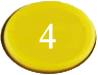
<style>
.page{position:relative;width:98px;height:75px;background:#ffffff}
.page>*{position:absolute;margin:0}
.t1{font:36px "TimesNewRomanPSMT";letter-spacing:-0.025em;color:#ffffff;font-weight:bold}
</style>
<div class="page">
<p class="t1" style="left:39px;top:23px;width:17px;height:26px">4</p>
</div>
